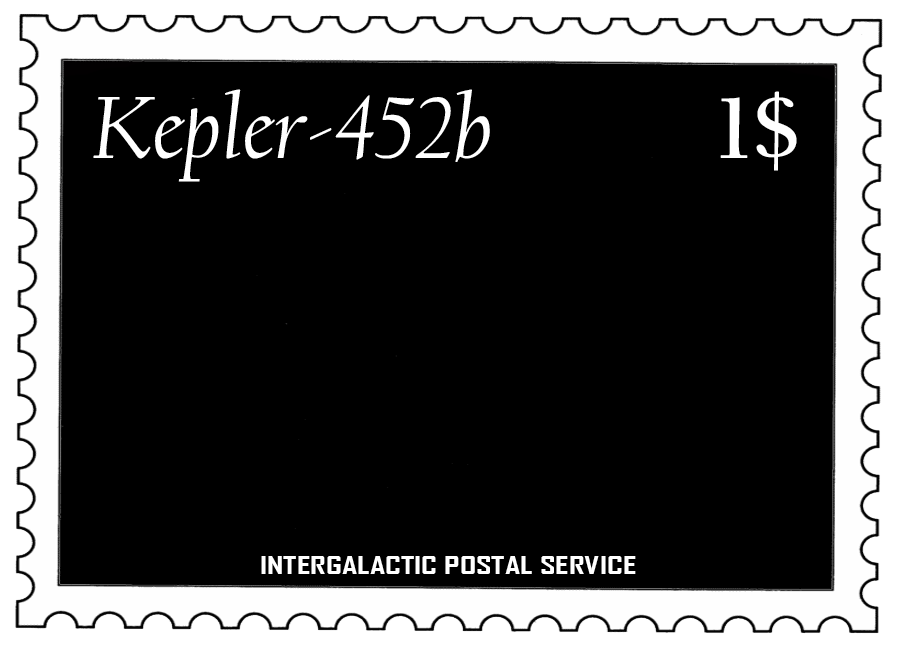
<style>
.page{position:relative;width:903px;height:648px;background:#000000}
.page>*{position:absolute;margin:0}
.t1{font:92px "CalifornianFB-Italic";color:#ffffff}
.t2{font:92px "CalifornianFB-Bold";color:#ffffff}
.t3{font:24px "AgencyFB-Bold";color:#ffffff;scale:1.42 1}
</style>
<div class="page">
<p class="t1" style="left:93px;top:89px;width:397px;height:93px">Kepler-452b</p>
<p class="t2" style="left:720px;top:91px;width:77px;height:80px">1$</p>
<p class="t3" style="left:261px;top:556px;width:375px;height:18px">INTERGALACTIC POSTAL SERVICE</p>
</div>
